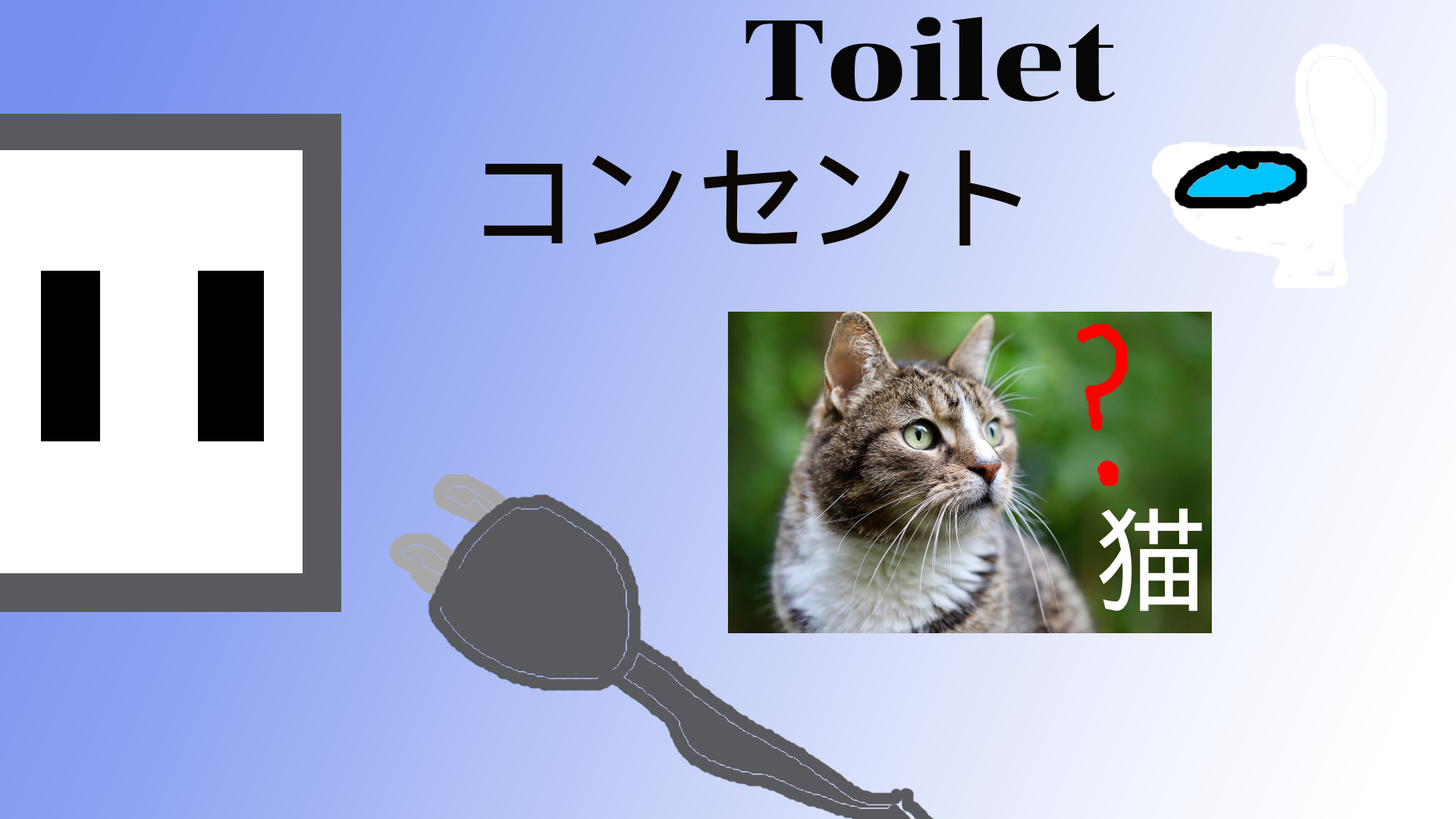
<style>
.page{position:relative;width:1456px;height:819px}
.page>*{position:absolute;margin:0}
.t1{font:113.7px "Chonburi-Regular";color:#060606}
.t2{font:113.7px "DroidSansFallback";color:#0c0700}
.t3{font:113.7px "DejaVuSans";color:#ffffff}
.t4{font:113.7px "DroidSansFallback";color:#ffffff}
</style>
<div class="page">
<p class="t1" style="left:745px;top:17px;width:370px;height:85px">Toilet</p>
<p class="t2" style="left:484px;top:149px;width:537px;height:97px"><span class="t3"> </span>コンセント</p>
<p class="t4" style="left:1099px;top:508px;width:103px;height:103px">猫</p>
</div>
